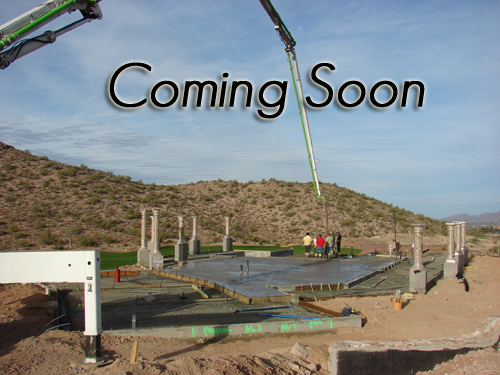
<style>
.page{position:relative;width:500px;height:375px}
.page>*{position:absolute;margin:0}
.t1{font:60px "GeosansLight-Oblique";color:#040000;font-weight:bold}
</style>
<div class="page">
<p class="t1" style="left:109px;top:62px;width:316px;height:57px">Coming Soon</p>
</div>
